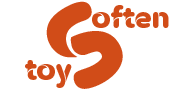
<style>
.page{position:relative;width:181px;height:89px;background:#ffffff}
.page>*{position:absolute;margin:0}
.t1{font:115px "OMEGLE-Regular";color:#d14c18}
.t2{font:33px "OMEGLE-Regular";color:#d14c18}
</style>
<div class="page">
<p class="t1" style="left:46px;top:1px;width:77px;height:88px;rotate:-34deg">S</p>
<p class="t2" style="left:92px;top:5px;width:77px;height:23px">often</p>
<p class="t2" style="left:25px;top:60px;width:47px;height:28px">toy</p>
</div>
